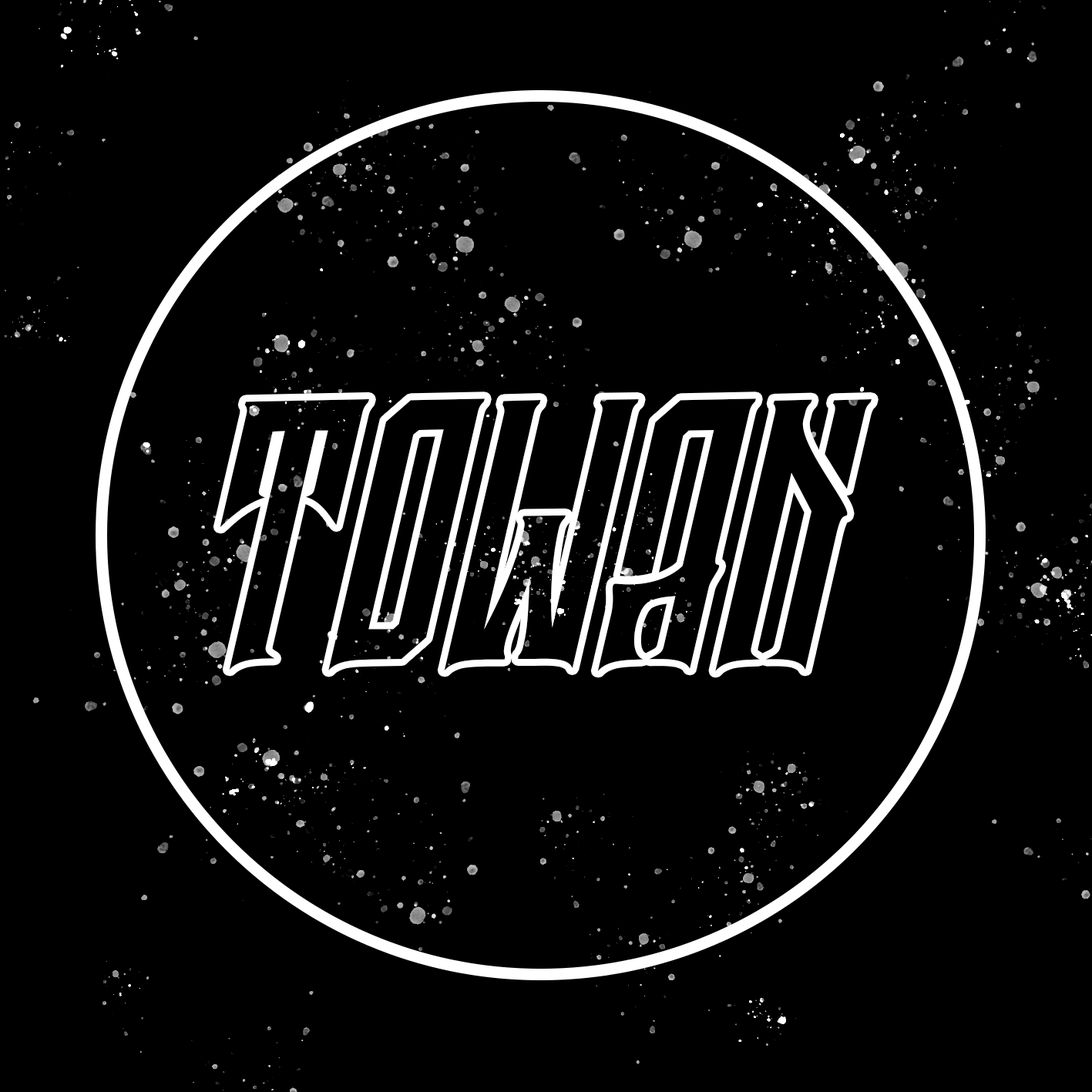
<style>
.page{position:relative;width:1092px;height:1092px;background:#000000}
.page>*{position:absolute;margin:0}
.t1{font:513.8px "GodhongPersonalUse-Regular";color:#000000}
</style>
<div class="page">
<p class="t1" style="left:220px;top:398px;width:652px;height:273px">TOWAN</p>
</div>
